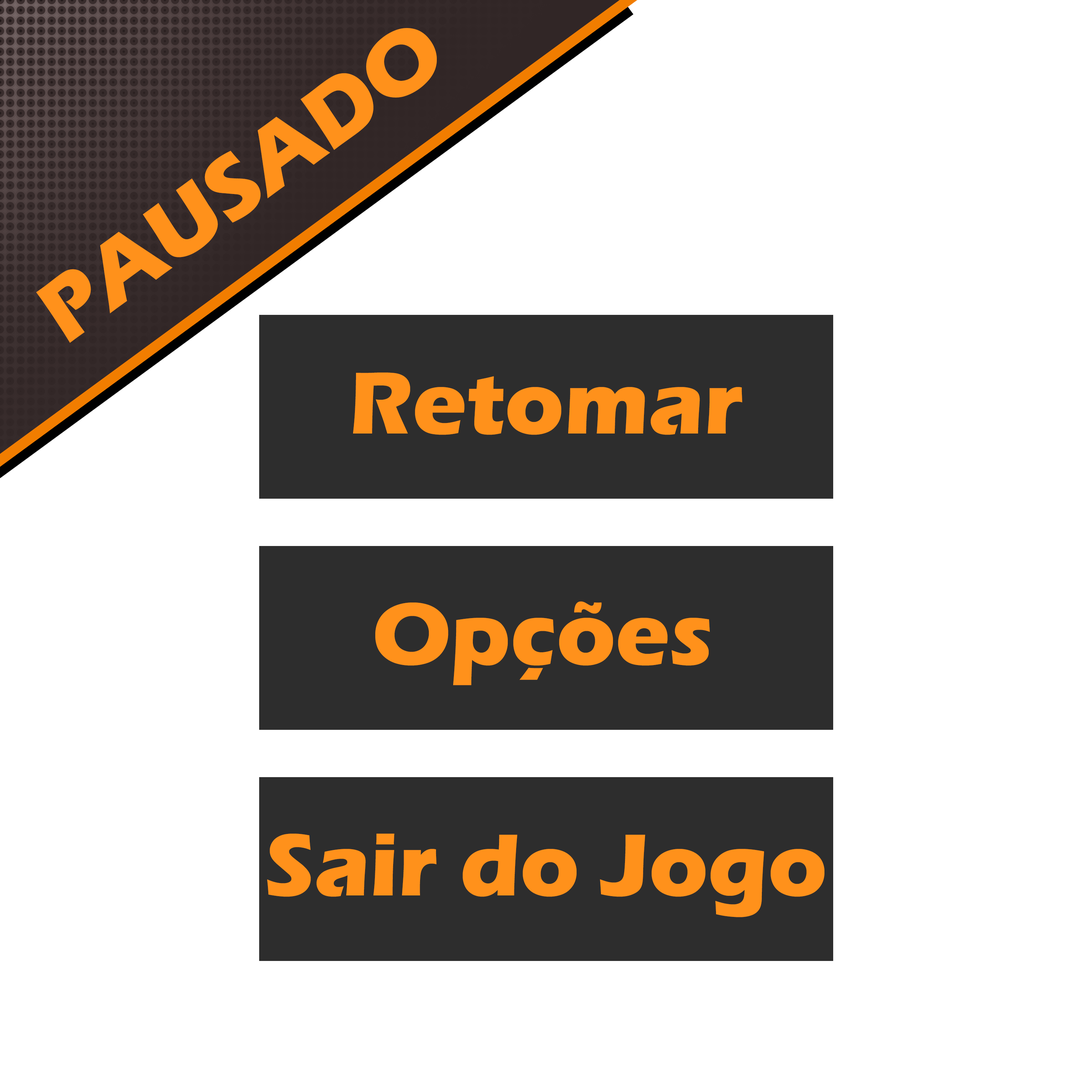
<style>
.page{position:relative;width:1092px;height:1092px;background:#ffffff}
.page>*{position:absolute;margin:0}
.t1{font:91px "ErasITC-Bold";color:#ff911b}
</style>
<div class="page">
<p class="t1" style="left:36px;top:28px;width:401px;height:315px;rotate:-36deg">PAUSADO</p>
<p class="t1" style="left:353px;top:372px;width:390px;height:63px">Retomar</p>
<p class="t1" style="left:375px;top:601px;width:335px;height:84px">Opções</p>
<p class="t1" style="left:267px;top:834px;width:557px;height:83px">Sair do Jogo</p>
</div>
